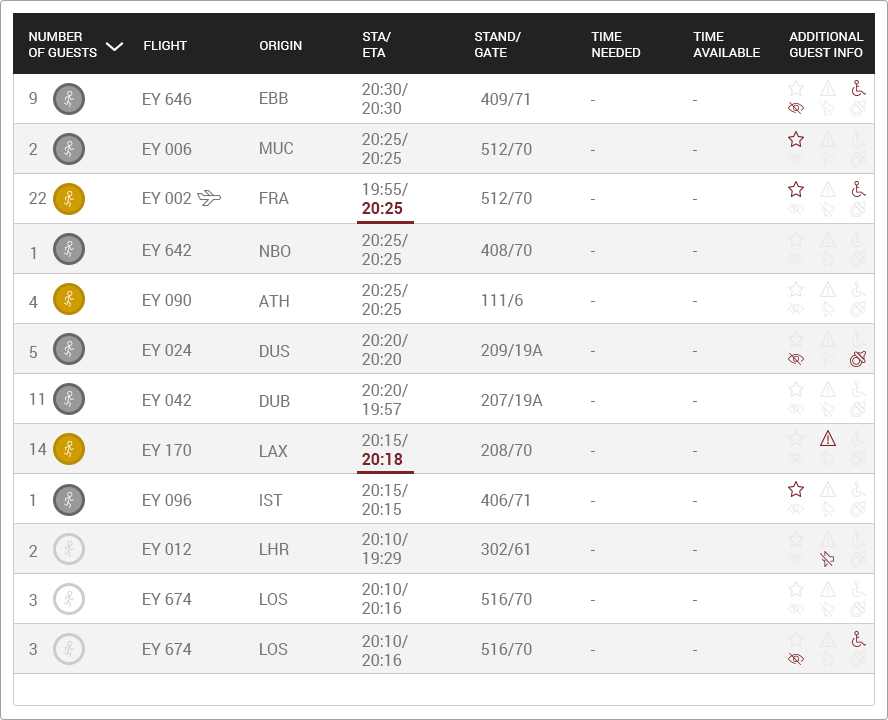
<style>
.page{position:relative;width:888px;height:720px;background:#ffffff}
.page>*{position:absolute;margin:0}
.t1{font:13px "Roboto-Regular";color:#ffffff;text-transform:uppercase}
.t2{font:16px "Roboto-Regular";color:#767676}
.t3{font:16px "Roboto-Bold";color:#7b2326}
</style>
<div class="page">
<p class="t1" style="left:29px;top:32px;width:68px;height:25px">Number<br>of Guests</p>
<p class="t1" style="left:144px;top:41px;width:43px;height:9px">Flight</p>
<p class="t1" style="left:260px;top:41px;width:42px;height:9px">Origin</p>
<p class="t1" style="left:363px;top:32px;width:28px;height:25px">STA/<br>ETA</p>
<p class="t1" style="left:475px;top:32px;width:46px;height:25px">Stand/<br>Gate</p>
<p class="t1" style="left:591px;top:32px;width:50px;height:25px">Time<br>Needed</p>
<p class="t1" style="left:693px;top:32px;width:67px;height:25px">Time<br>Available</p>
<p class="t1" style="left:789px;top:32px;width:75px;height:25px">Additional<br>Guest Info</p>
<p class="t2" style="left:362px;top:83px;width:46px;height:31px">20:30/<br>20:30</p>
<p class="t2" style="left:29px;top:92px;width:8px;height:12px">9</p>
<p class="t2" style="left:143px;top:93px;width:49px;height:12px">EY 646</p>
<p class="t2" style="left:260px;top:92px;width:28px;height:12px">EBB</p>
<p class="t2" style="left:481px;top:93px;width:48px;height:13px">409/71</p>
<p class="t2" style="left:590px;top:100px;width:5px;height:1px">-</p>
<p class="t2" style="left:692px;top:100px;width:5px;height:1px">-</p>
<p class="t2" style="left:362px;top:133px;width:46px;height:31px">20:25/<br>20:25</p>
<p class="t2" style="left:29px;top:143px;width:9px;height:12px">2</p>
<p class="t2" style="left:143px;top:143px;width:49px;height:12px">EY 006</p>
<p class="t2" style="left:260px;top:142px;width:33px;height:12px">MUC</p>
<p class="t2" style="left:481px;top:143px;width:51px;height:13px">512/70</p>
<p class="t2" style="left:590px;top:150px;width:5px;height:1px">-</p>
<p class="t2" style="left:692px;top:150px;width:5px;height:1px">-</p>
<p class="t2" style="left:362px;top:183px;width:46px;height:31px">19:55/<br><span class="t3">20:25</span></p>
<p class="t2" style="left:29px;top:192px;width:18px;height:12px">22</p>
<p class="t2" style="left:143px;top:192px;width:49px;height:12px">EY 002</p>
<p class="t2" style="left:260px;top:192px;width:29px;height:12px">FRA</p>
<p class="t2" style="left:481px;top:192px;width:51px;height:13px">512/70</p>
<p class="t2" style="left:590px;top:199px;width:5px;height:1px">-</p>
<p class="t2" style="left:692px;top:199px;width:5px;height:1px">-</p>
<p class="t2" style="left:143px;top:244px;width:49px;height:12px">EY 642</p>
<p class="t2" style="left:260px;top:245px;width:31px;height:12px">NBO</p>
<p class="t2" style="left:362px;top:234px;width:46px;height:31px">20:25/<br>20:25</p>
<p class="t2" style="left:481px;top:244px;width:51px;height:13px">408/70</p>
<p class="t2" style="left:31px;top:247px;width:5px;height:12px">1</p>
<p class="t2" style="left:590px;top:251px;width:5px;height:1px">-</p>
<p class="t2" style="left:692px;top:251px;width:5px;height:1px">-</p>
<p class="t2" style="left:143px;top:294px;width:48px;height:12px">EY 090</p>
<p class="t2" style="left:362px;top:284px;width:46px;height:31px">20:25/<br>20:25</p>
<p class="t2" style="left:482px;top:294px;width:41px;height:13px">111/6</p>
<p class="t2" style="left:29px;top:296px;width:9px;height:12px">4</p>
<p class="t2" style="left:258px;top:295px;width:31px;height:12px">ATH</p>
<p class="t2" style="left:590px;top:301px;width:5px;height:1px">-</p>
<p class="t2" style="left:692px;top:301px;width:5px;height:1px">-</p>
<p class="t2" style="left:362px;top:334px;width:46px;height:31px">20:20/<br>20:20</p>
<p class="t2" style="left:29px;top:346px;width:8px;height:12px">5</p>
<p class="t2" style="left:143px;top:344px;width:49px;height:12px">EY 024</p>
<p class="t2" style="left:260px;top:345px;width:30px;height:12px">DUS</p>
<p class="t2" style="left:481px;top:344px;width:62px;height:13px">209/19A</p>
<p class="t2" style="left:590px;top:351px;width:5px;height:1px">-</p>
<p class="t2" style="left:692px;top:351px;width:5px;height:1px">-</p>
<p class="t2" style="left:362px;top:384px;width:46px;height:31px">20:20/<br>19:57</p>
<p class="t2" style="left:30px;top:393px;width:14px;height:12px">11</p>
<p class="t2" style="left:143px;top:394px;width:49px;height:12px">EY 042</p>
<p class="t2" style="left:260px;top:395px;width:30px;height:12px">DUB</p>
<p class="t2" style="left:481px;top:394px;width:62px;height:13px">207/19A</p>
<p class="t2" style="left:590px;top:401px;width:5px;height:1px">-</p>
<p class="t2" style="left:692px;top:401px;width:5px;height:1px">-</p>
<p class="t2" style="left:362px;top:434px;width:46px;height:31px">20:15/<br><span class="t3">20:18</span></p>
<p class="t2" style="left:30px;top:443px;width:17px;height:12px">14</p>
<p class="t2" style="left:143px;top:444px;width:48px;height:12px">EY 170</p>
<p class="t2" style="left:260px;top:445px;width:28px;height:12px">LAX</p>
<p class="t2" style="left:481px;top:444px;width:51px;height:13px">208/70</p>
<p class="t2" style="left:590px;top:451px;width:5px;height:1px">-</p>
<p class="t2" style="left:692px;top:451px;width:5px;height:1px">-</p>
<p class="t2" style="left:362px;top:484px;width:46px;height:31px">20:15/<br>20:15</p>
<p class="t2" style="left:30px;top:494px;width:5px;height:12px">1</p>
<p class="t2" style="left:143px;top:494px;width:49px;height:12px">EY 096</p>
<p class="t2" style="left:260px;top:494px;width:23px;height:12px">IST</p>
<p class="t2" style="left:481px;top:494px;width:48px;height:13px">406/71</p>
<p class="t2" style="left:590px;top:501px;width:5px;height:1px">-</p>
<p class="t2" style="left:692px;top:501px;width:5px;height:1px">-</p>
<p class="t2" style="left:362px;top:533px;width:46px;height:31px">20:10/<br>19:29</p>
<p class="t2" style="left:29px;top:545px;width:9px;height:12px">2</p>
<p class="t2" style="left:143px;top:543px;width:49px;height:12px">EY 012</p>
<p class="t2" style="left:260px;top:543px;width:29px;height:12px">LHR</p>
<p class="t2" style="left:481px;top:543px;width:48px;height:13px">302/61</p>
<p class="t2" style="left:590px;top:550px;width:5px;height:1px">-</p>
<p class="t2" style="left:692px;top:550px;width:5px;height:1px">-</p>
<p class="t2" style="left:143px;top:593px;width:49px;height:12px">EY 674</p>
<p class="t2" style="left:260px;top:593px;width:28px;height:12px">LOS</p>
<p class="t2" style="left:362px;top:583px;width:46px;height:31px">20:10/<br>20:16</p>
<p class="t2" style="left:481px;top:593px;width:51px;height:13px">516/70</p>
<p class="t2" style="left:29px;top:594px;width:8px;height:12px">3</p>
<p class="t2" style="left:590px;top:600px;width:5px;height:1px">-</p>
<p class="t2" style="left:692px;top:600px;width:5px;height:1px">-</p>
<p class="t2" style="left:362px;top:635px;width:46px;height:31px">20:10/<br>20:16</p>
<p class="t2" style="left:29px;top:643px;width:8px;height:12px">3</p>
<p class="t2" style="left:143px;top:643px;width:49px;height:12px">EY 674</p>
<p class="t2" style="left:260px;top:643px;width:28px;height:12px">LOS</p>
<p class="t2" style="left:481px;top:643px;width:51px;height:13px">516/70</p>
<p class="t2" style="left:590px;top:650px;width:5px;height:1px">-</p>
<p class="t2" style="left:692px;top:650px;width:5px;height:1px">-</p>
</div>
